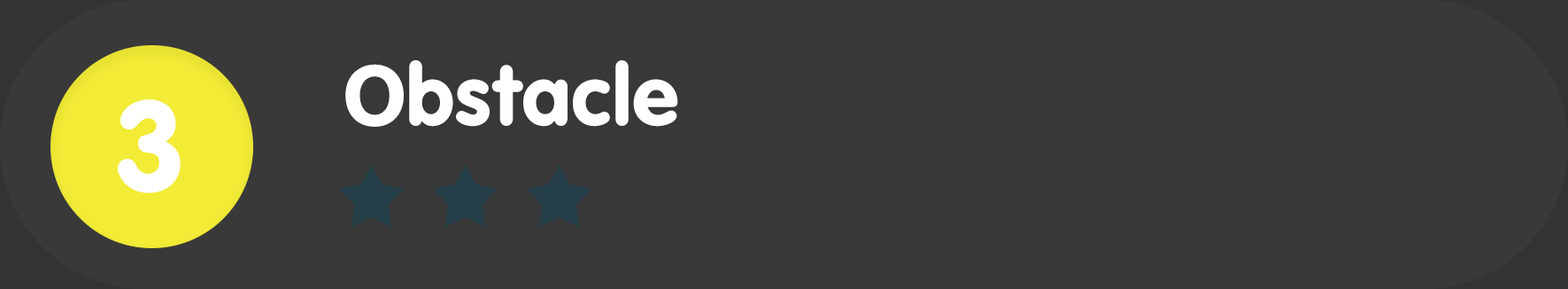
<style>
.page{position:relative;width:1568px;height:289px;background:#393939}
.page>*{position:absolute;margin:0}
.t1{font:88.5px "VAGRundschriftD";color:#ffffff}
.t2{font:132.8px "VAGRundschriftD";color:#ffffff}
</style>
<div class="page">
<p class="t1" style="left:345px;top:60px;width:333px;height:67px">Obstacle</p>
<p class="t2" style="left:118px;top:99px;width:63px;height:94px">3</p>
</div>
